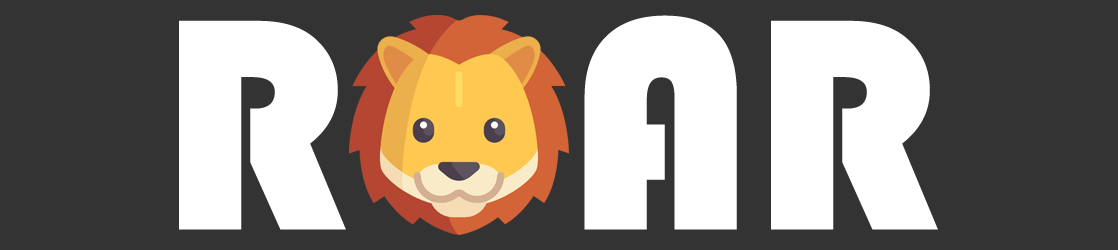
<style>
.page{position:relative;width:1118px;height:250px;background:#333333}
.page>*{position:absolute;margin:0}
.t1{font:312.8px "Bauhaus93";letter-spacing:-0.01em;color:#ffffff}
</style>
<div class="page">
<p class="t1" style="left:179px;top:15px;width:759px;height:215px">R   AR</p>
</div>
